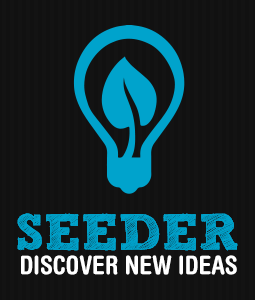
<style>
.page{position:relative;width:255px;height:300px;background:#111111}
.page>*{position:absolute;margin:0}
.t1{font:51.1px "SketchRockwell";color:#00a3cc}
.t2{font:25.8px "HelveticaRoundedLTStd-BdCn";color:#ffffff}
</style>
<div class="page">
<p class="t1" style="left:17px;top:213px;width:221px;height:38px">SEEDER</p>
<p class="t1" style="left:17px;top:213px;width:221px;height:38px">SEEDER</p>
<p class="t2" style="left:21px;top:255px;width:216px;height:20px">DISCOVER NEW IDEAS</p>
</div>
